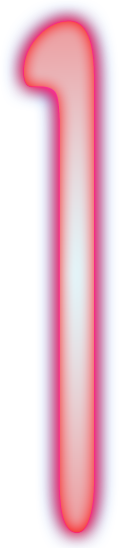
<style>
.page{position:relative;width:132px;height:548px;background:#ffffff}
.page>*{position:absolute;margin:0}
.t1{font:730px "Clockopia";letter-spacing:0.025em;scale:0.5 1}
</style>
<div class="page">
<p class="t1" style="left:24px;top:21px;width:70px;height:512px">1</p>
<p class="t1" style="left:24px;top:21px;width:70px;height:512px">1</p>
</div>
